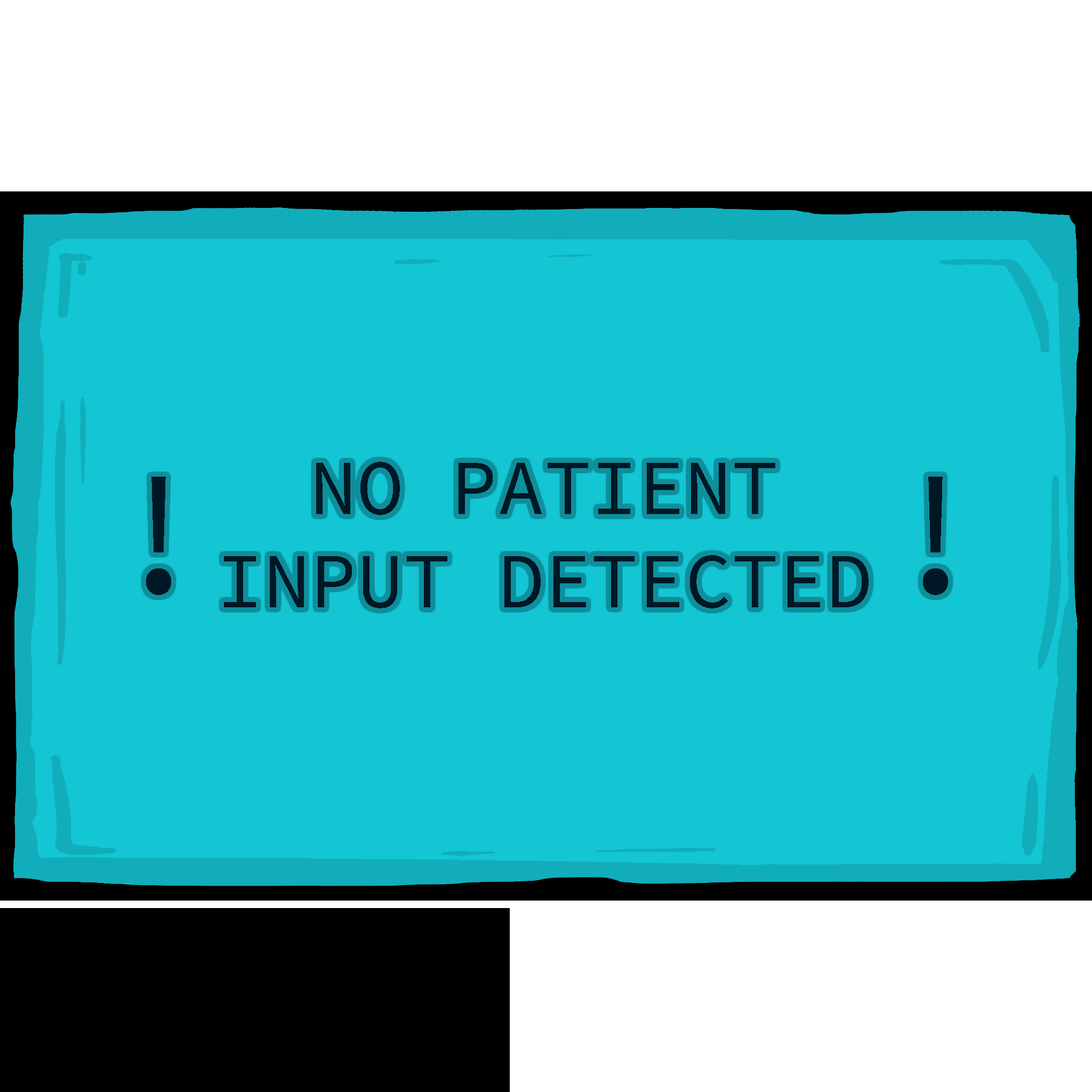
<style>
.page{position:relative;width:1092px;height:1092px;background:#14c5d3}
.page>*{position:absolute;margin:0}
.t1{font:78.1px "SourceCodePro-Regular";color:#001826;font-weight:bold}
.t2{font:173.3px "SourceCodePro-Regular";color:#001826;font-weight:bold}
</style>
<div class="page">
<p class="t1" style="left:224px;top:462px;width:645px;height:146px;text-align:center">NO PATIENT<br>INPUT DETECTED</p>
<p class="t2" style="left:146px;top:477px;width:25px;height:118px">!</p>
<p class="t2" style="left:923px;top:477px;width:25px;height:118px">!</p>
</div>
